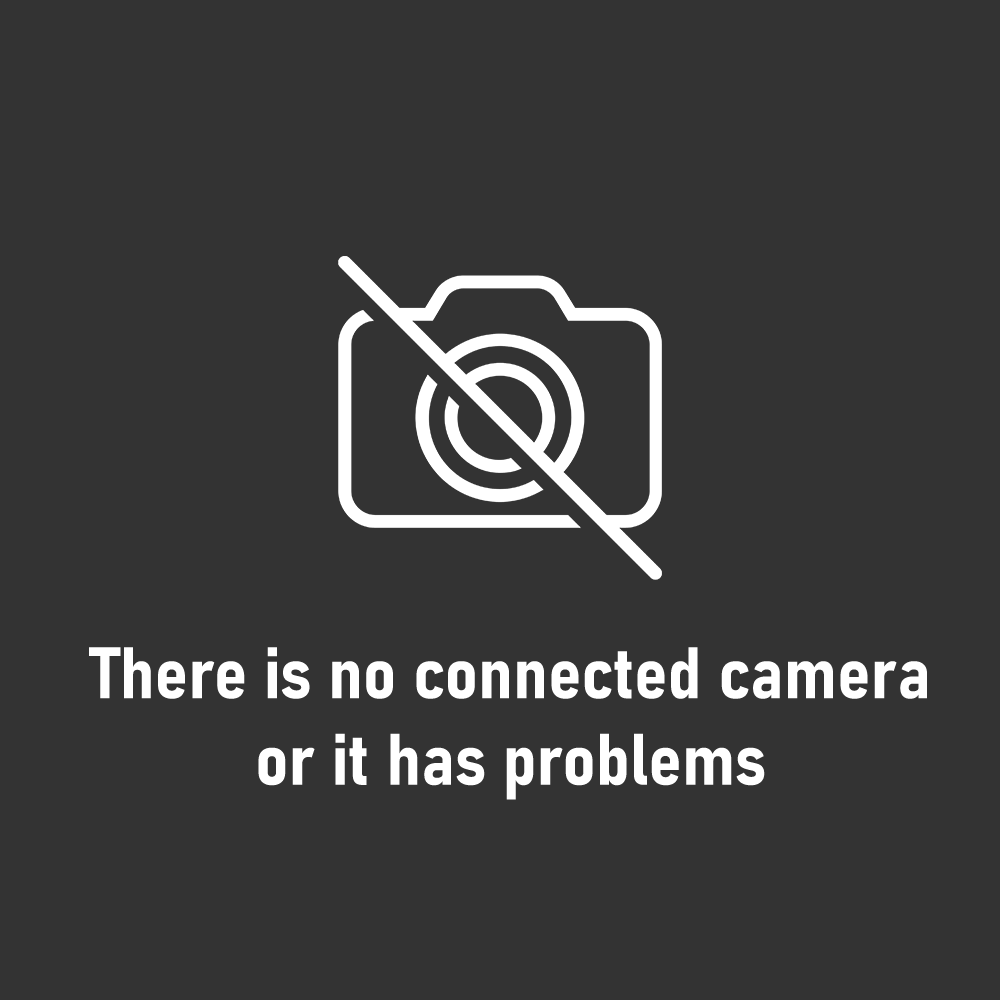
<style>
.page{position:relative;width:1000px;height:1000px;background:#333333}
.page>*{position:absolute;margin:0}
.t1{font:72px "Bahnschrift-BoldSemiCondensed";color:#ffffff}
</style>
<div class="page">
<p class="t1" style="left:89px;top:647px;width:838px;height:153px;text-align:center">There is no connected camera or it has problems</p>
</div>
